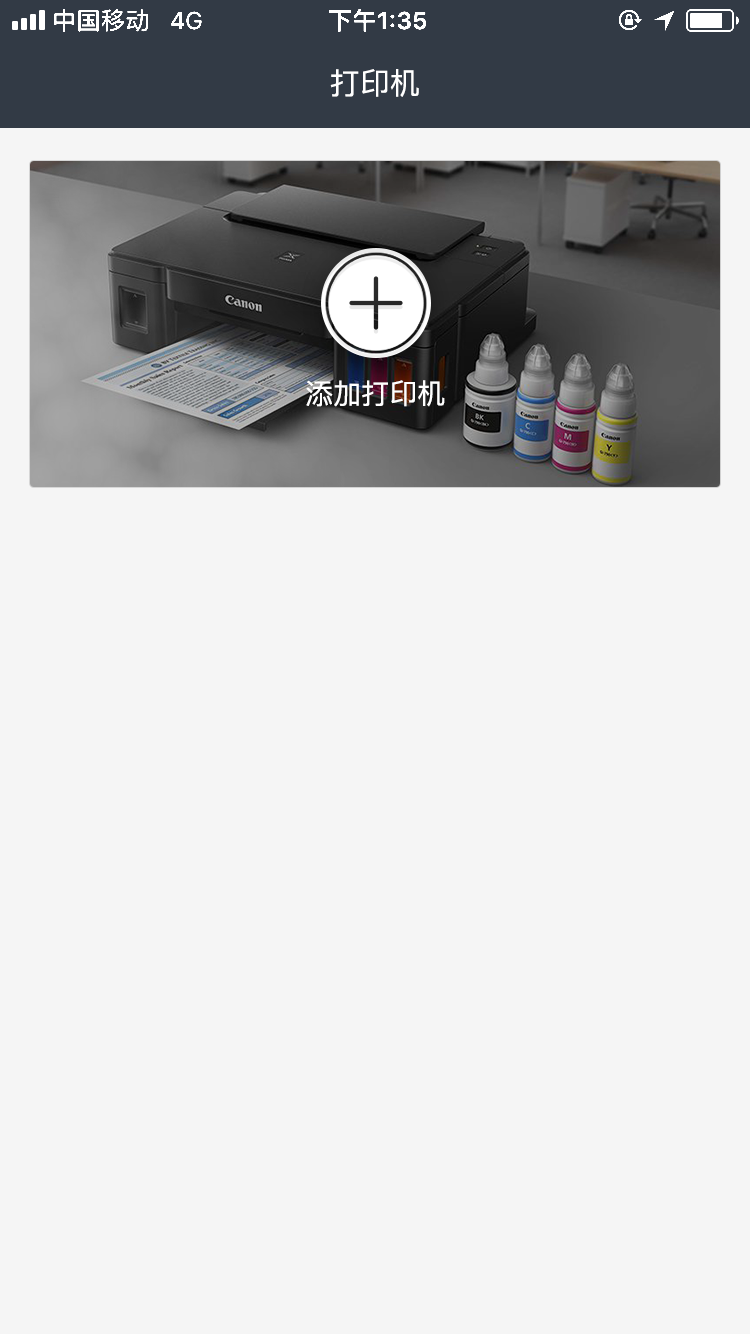
<style>
.page{position:relative;width:750px;height:1334px;background:#f5f5f5}
.page>*{position:absolute;margin:0}
.t1{font:30px "PingFang-SC-Medium";color:#ffffff}
.t2{font:28px "PingFang-SC-Medium";color:#ffffff}
</style>
<div class="page">
<p class="t1" style="left:330px;top:69px;width:89px;height:28px">打印机</p>
<p class="t2" style="left:306px;top:380px;width:139px;height:27px">添加打印机</p>
</div>
